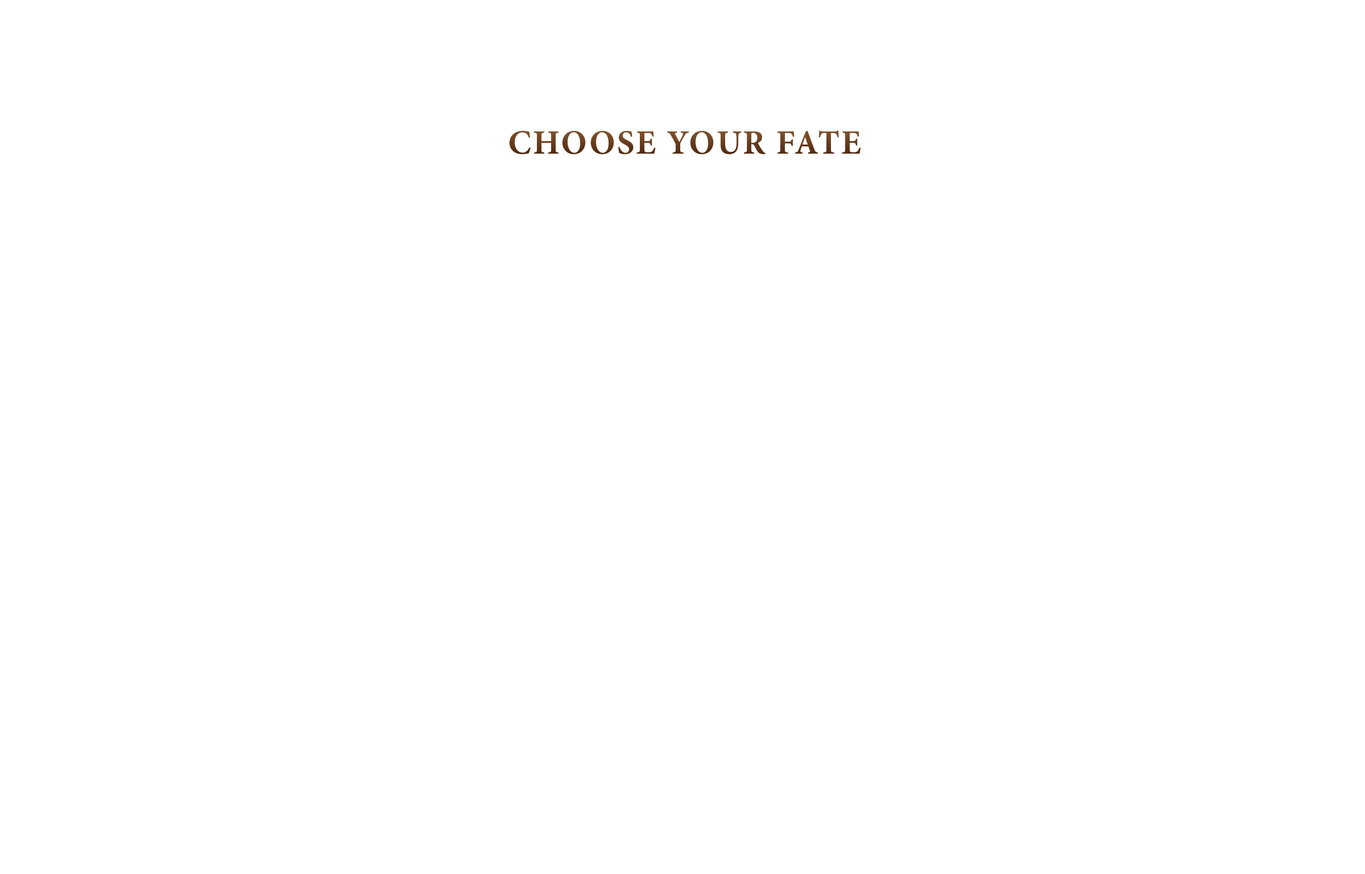
<style>
.page{position:relative;width:1365px;height:874px;background:#ffffff}
.page>*{position:absolute;margin:0}
.t1{font:34.1px "MinionPro-Bold";letter-spacing:0.05em;color:#693e1f;text-transform:uppercase}
.t2{font:34.1px "MinionPro-Bold";letter-spacing:0.05em;color:#693e1f}
</style>
<div class="page">
<p class="t1" style="left:509px;top:130px;width:352px;height:24px"><span class="t2">C</span>hoose your fate</p>
</div>
